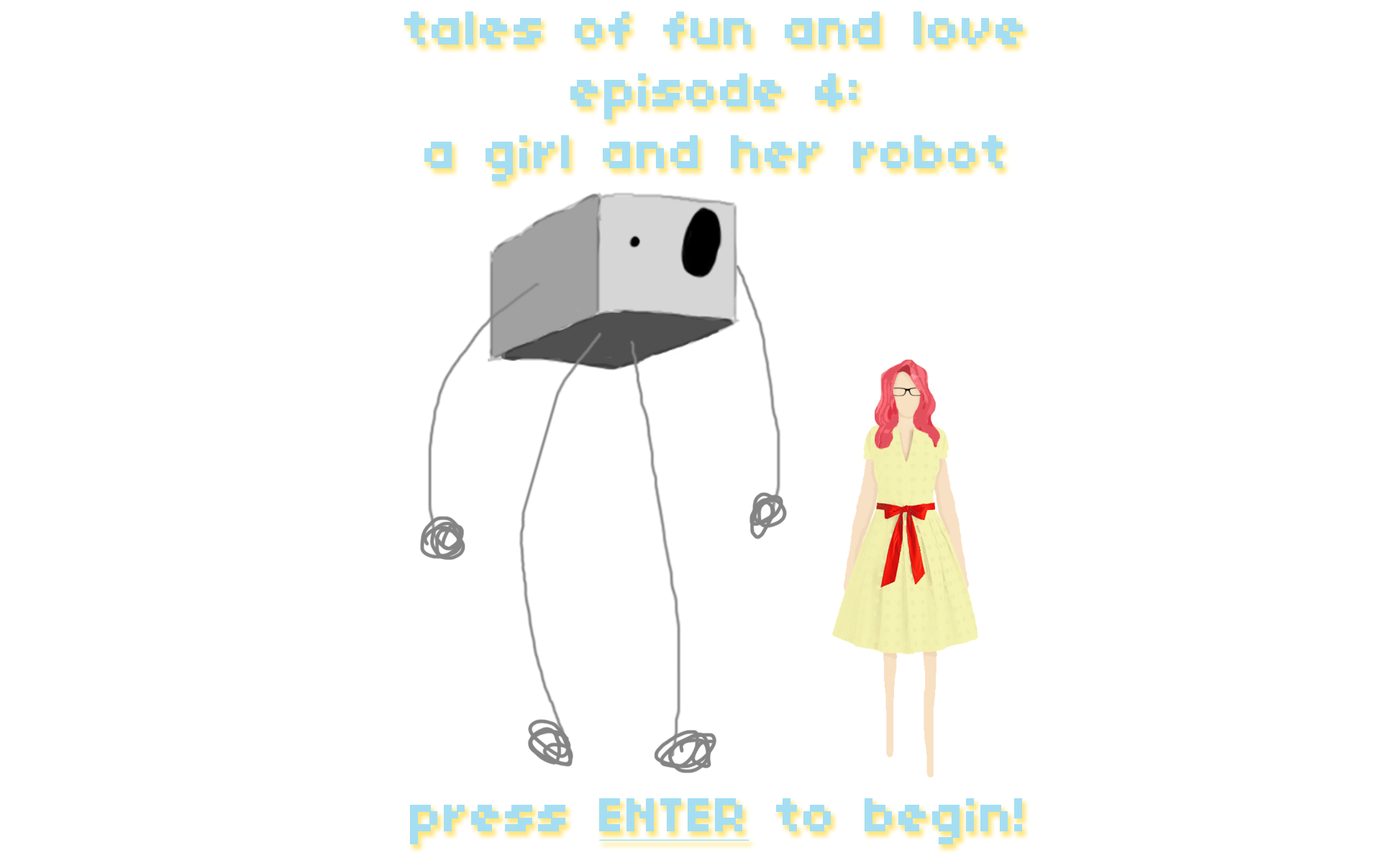
<style>
.page{position:relative;width:1381px;height:863px;background:#ffffff}
.page>*{position:absolute;margin:0}
.t1{font:51.8px "04b03";color:#a5def3;font-weight:bold}
.t2{font:51.8px "04b03";color:#a5def3;font-weight:bold;text-decoration:underline}
</style>
<div class="page">
<p class="t1" style="left:404px;top:12px;width:619px;height:169px;text-align:center">tales of fun and love<br>episode 4:<br>a girl and her robot</p>
<p class="t1" style="left:410px;top:799px;width:612px;height:46px">press <span class="t2">ENTER</span> to begin!</p>
</div>
